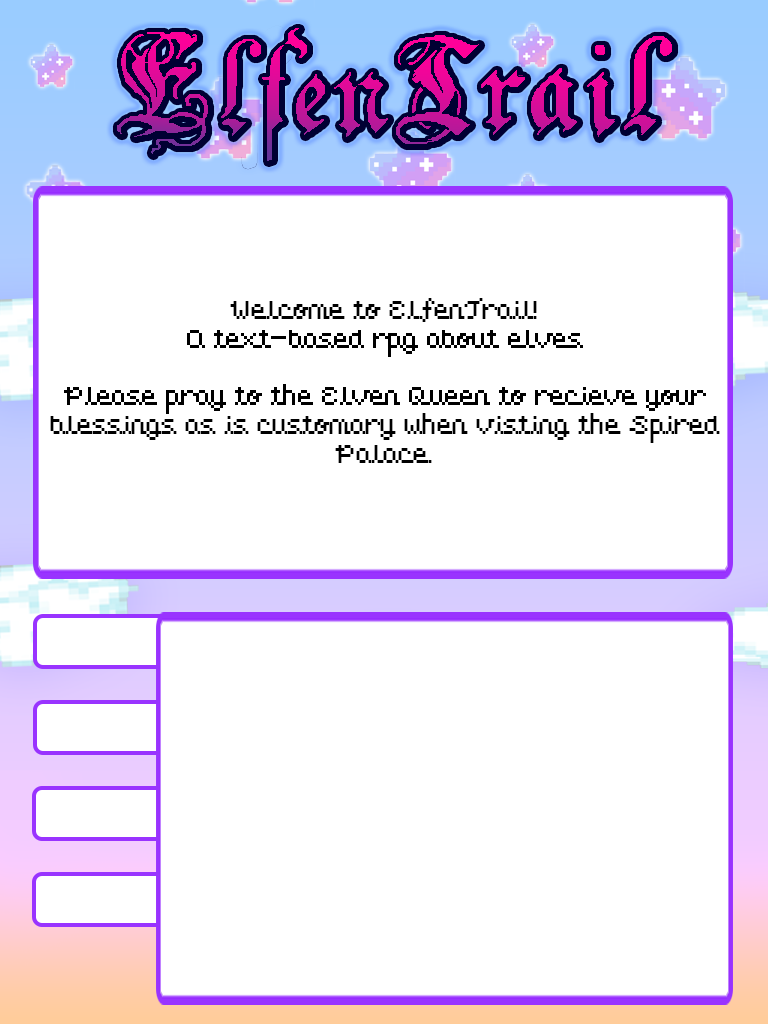
<style>
.page{position:relative;width:768px;height:1024px;background:#ffffff}
.page>*{position:absolute;margin:0}
.t1{font:24px "untitled-regular";color:#000000}
.t2{font:36px "untitled-regular";color:#000000}
</style>
<div class="page">
<p class="t1" style="left:50px;top:298px;width:670px;height:165px;text-align:center"><span class="t2"><br></span>Welcome to ElfenTrail!<br>A text-based rpg about elves<br><br>Please pray to the Elven Queen to recieve your blessings as is customary when visting the Spired Palace.</p>
</div>
